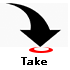
<style>
.page{position:relative;width:70px;height:70px;background:#ffffff}
.page>*{position:absolute;margin:0}
.t1{font:10px "MicrosoftYaHei";color:#000000;font-weight:bold}
</style>
<div class="page">
<p class="t1" style="left:21px;top:57px;width:26px;height:8px">Take</p>
</div>
